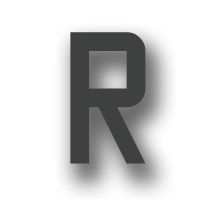
<style>
.page{position:relative;width:215px;height:200px;background:#ffffff}
.page>*{position:absolute;margin:0}
.t1{font:150px "Manteka";color:#3f4040}
</style>
<div class="page">
<p class="t1" style="left:70px;top:32px;width:76px;height:132px">R</p>
</div>
